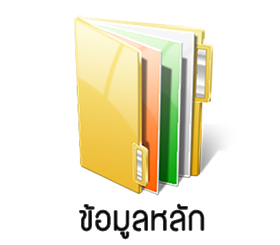
<style>
.page{position:relative;width:280px;height:245px;background:#ffffff}
.page>*{position:absolute;margin:0}
.t1{font:30px "BangnaNew";color:#020200}
</style>
<div class="page">
<p class="t1" style="left:80px;top:204px;width:124px;height:35px">ข้อมูลหลัก</p>
</div>
